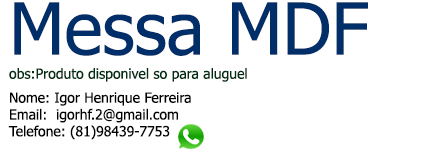
<style>
.page{position:relative;width:433px;height:157px;background:#ffffff}
.page>*{position:absolute;margin:0}
.t1{font:14px "Tahoma";color:#000000}
.t2{font:72px "Tahoma";color:#002e69}
.t3{font:14px/24px "Tahoma";color:#002e14}
.t4{font:14px/24px "Tahoma";color:#000000}
</style>
<div class="page">
<p class="t1" style="left:8px;top:2px;width:360px;height:138px"><span class="t2">Messa MDF<br></span><span class="t3">obs:Produto disponivel so para aluguel<br></span><span class="t4">Nome: Igor Henrique Ferreira<br></span>Email:  igorhf.2@gmail.com<br>Telefone: (81)98439-7753</p>
</div>
